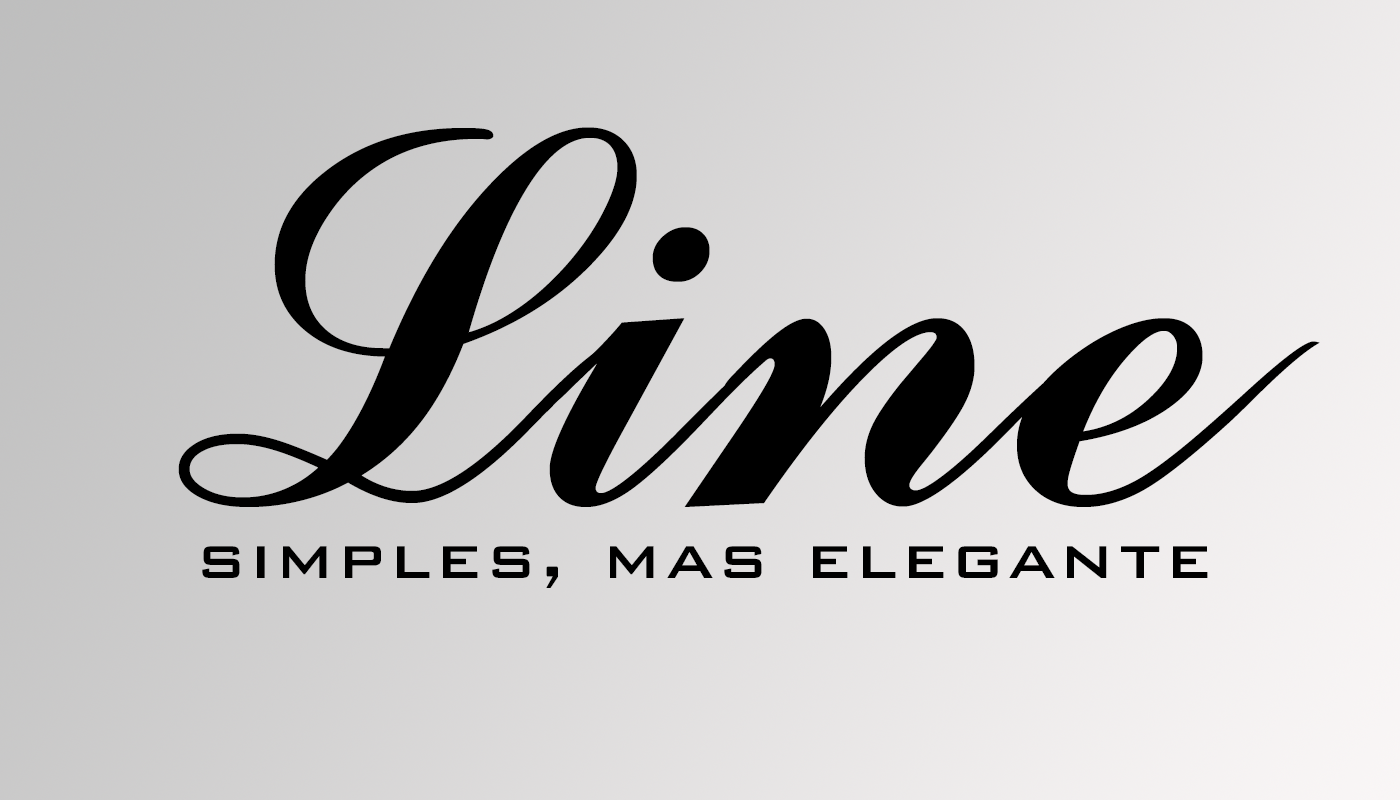
<style>
.page{position:relative;width:1400px;height:800px}
.page>*{position:absolute;margin:0}
.t1{font:600px "CommercialScriptBT-Regular";color:#000000}
.t2{font:75px "BankGothicBT-Medium";letter-spacing:0.06em;color:#000000}
</style>
<div class="page">
<p class="t1" style="left:178px;top:127px;width:1142px;height:380px">Line</p>
<p class="t2" style="left:202px;top:546px;width:1006px;height:42px">simples, mas elegante</p>
</div>
